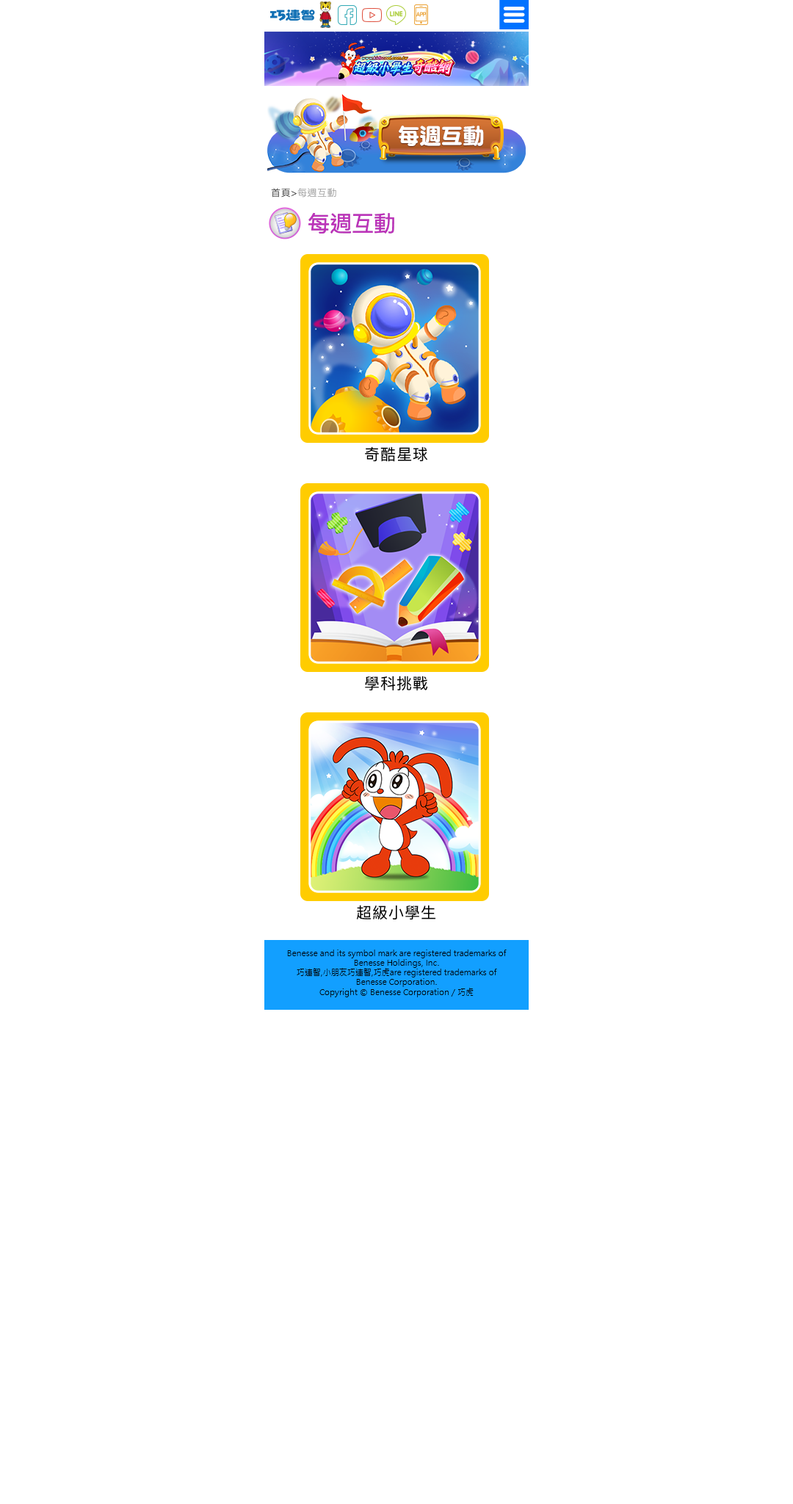
<style>
.page{position:relative;width:793px;height:1504px;background:#ffffff}
.page>*{position:absolute;margin:0}
.t1{font:22px "DFNYuan-W9-WINP-BF";color:#ffffff}
.t2{font:9.5px "PingFangTC-Thin";letter-spacing:0.05em;color:#9f9f9f}
.t3{font:9.5px "PingFangTC-Thin";letter-spacing:0.05em;color:#000000}
.t4{font:22px "PingFangTC-Regular";color:#bc34ba}
.t5{font:15.4px "PingFangTC-Regular";letter-spacing:0.05em;color:#000000}
</style>
<div class="page">
<p class="t1" style="left:399px;top:126px;width:85px;height:20px">每週互動</p>
<p class="t2" style="left:271px;top:188px;width:65px;height:10px"><span class="t3">首頁&gt;</span>每週互動</p>
<p class="t4" style="left:308px;top:212px;width:86px;height:21px">每週互動</p>
<p class="t5" style="left:365px;top:446px;width:63px;height:16px">奇酷星球</p>
<p class="t5" style="left:365px;top:676px;width:63px;height:15px">學科挑戰</p>
<p class="t5" style="left:356px;top:905px;width:79px;height:15px">超級小學生</p>
</div>
